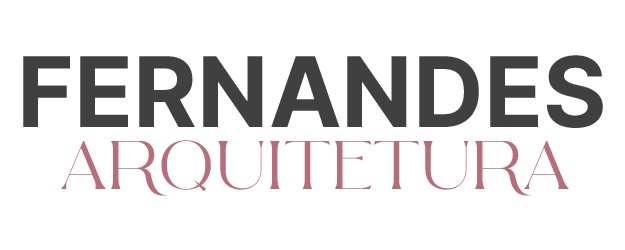
<style>
.page{position:relative;width:625px;height:250px;background:#ffffff}
.page>*{position:absolute;margin:0}
.t1{font:97.2px "Inter-Bold";color:#404040}
.t2{font:69.4px "ArolseBelmonteriaSerif";color:#b76e79}
</style>
<div class="page">
<p class="t1" style="left:23px;top:55px;width:580px;height:73px">FERNANDES</p>
<p class="t2" style="left:60px;top:140px;width:509px;height:56px">ARQUITETURA</p>
</div>
